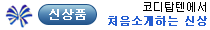
<style>
.page{position:relative;width:210px;height:30px;background:#ffffff}
.page>*{position:absolute;margin:0}
.t1{font:11px/14px "Dotum";color:#245dd2;font-weight:bold}
.t2{font:11px/14px "Dotum";color:#000000}
.t3{font:12px "Dotum";color:#ffffff;font-weight:bold}
</style>
<div class="page">
<p class="t1" style="left:108px;top:2px;width:99px;height:24px;text-align:right"><span class="t2">코디탑텐에서<br></span>처음소개하는 신상</p>
<p class="t3" style="left:49px;top:9px;width:37px;height:11px">신상품</p>
</div>
